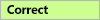
<style>
.page{position:relative;width:100px;height:20px;background:#ccff90}
.page>*{position:absolute;margin:0}
.t1{font:12.5px "Gadugi-Bold";letter-spacing:-0.02em;color:#000000}
</style>
<div class="page">
<p class="t1" style="left:7px;top:5px;width:41px;height:9px">Correct</p>
</div>
